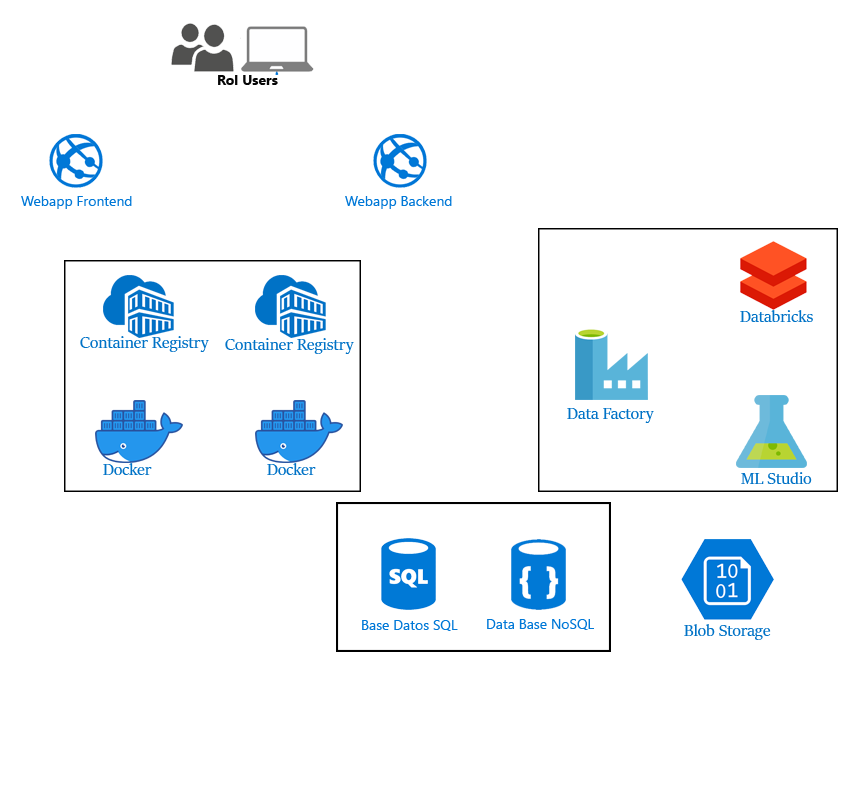
<style>
.page{position:relative;width:850px;height:794px;background:#ffffff}
.page>*{position:absolute;margin:0}
.t1{font:14px "SegoeUI-Bold";color:#060606}
.t2{font:14px "SegoeUI";color:#0078d7}
.t3{font:18px "SitkaBanner";color:#0072c6}
</style>
<div class="page">
<p class="t1" style="left:218px;top:75px;width:60px;height:10px">Rol Users</p>
<p class="t2" style="left:21px;top:196px;width:111px;height:13px">Webapp Frontend</p>
<p class="t2" style="left:345px;top:196px;width:107px;height:13px">Webapp Backend</p>
<p class="t3" style="left:740px;top:310px;width:73px;height:12px">Databricks</p>
<p class="t3" style="left:80px;top:336px;width:129px;height:16px">Container Registry</p>
<p class="t3" style="left:225px;top:338px;width:129px;height:16px">Container Registry</p>
<p class="t3" style="left:567px;top:408px;width:87px;height:15px">Data Factory</p>
<p class="t3" style="left:103px;top:463px;width:49px;height:12px">Docker</p>
<p class="t3" style="left:267px;top:463px;width:49px;height:12px">Docker</p>
<p class="t3" style="left:741px;top:472px;width:71px;height:12px">ML Studio</p>
<p class="t2" style="left:362px;top:620px;width:96px;height:11px">Base Datos SQL</p>
<p class="t2" style="left:487px;top:619px;width:107px;height:11px">Data Base NoSQL</p>
<p class="t3" style="left:684px;top:624px;width:87px;height:16px">Blob Storage</p>
</div>
